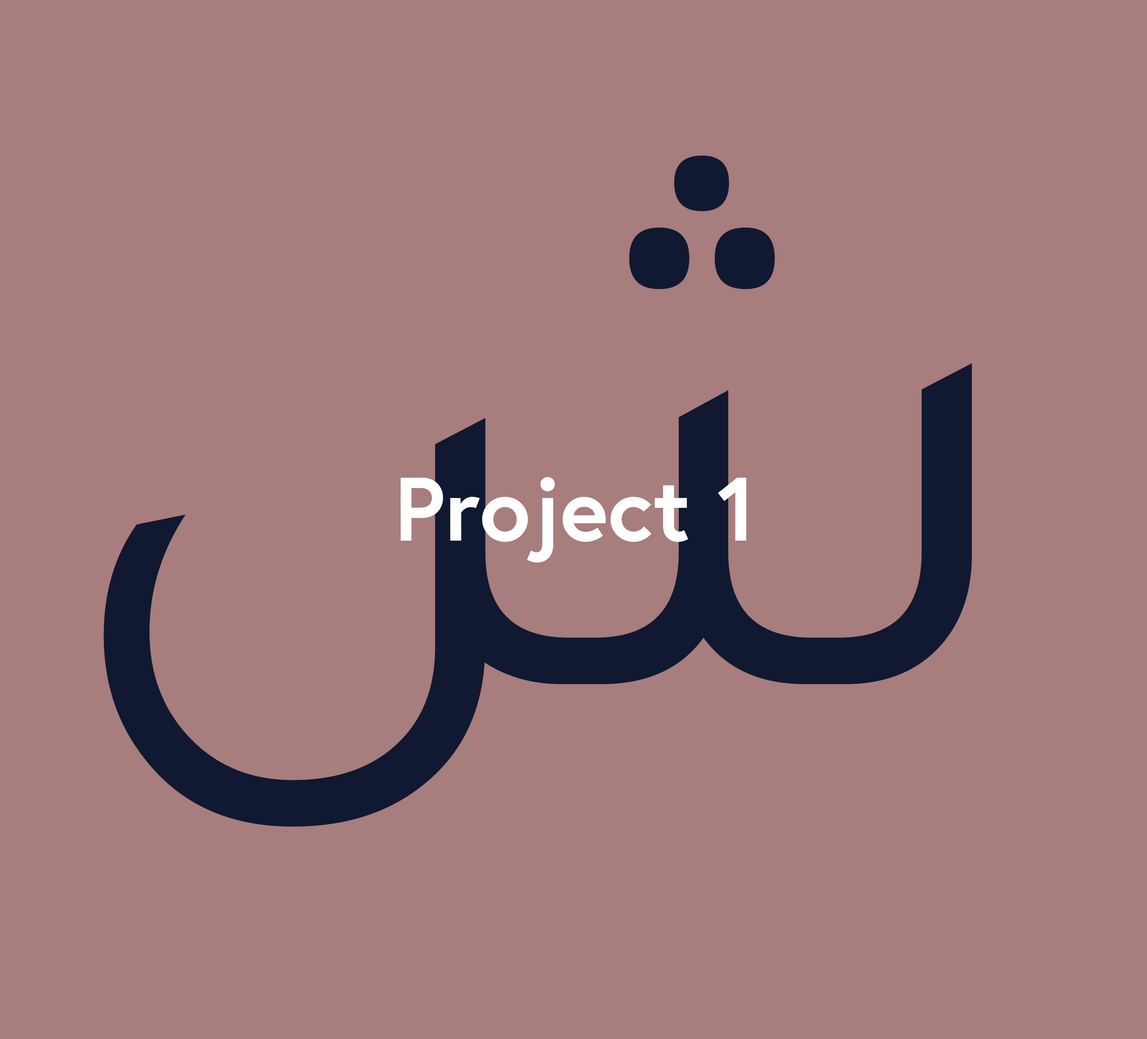
<style>
.page{position:relative;width:1147px;height:1039px;background:#a77d7d}
.page>*{position:absolute;margin:0}
.t1{font:749.9px "Tajawal-Regular";color:#101931}
.t2{font:90px "Europa-Bold";color:#ffffff}
</style>
<div class="page">
<p class="t1" style="left:103px;top:156px;width:869px;height:671px">ش</p>
<p class="t2" style="left:400px;top:477px;width:346px;height:86px">Project 1</p>
</div>
